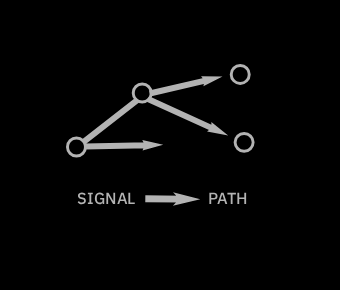
<style>
.page{position:relative;width:340px;height:290px;background:#000000}
.page>*{position:absolute;margin:0}
.t1{font:16.1px "IBMPlexSans-Medium";color:#b3b3b3}
</style>
<div class="page">
<p class="t1" style="left:77px;top:192px;width:58px;height:13px">SIGNAL</p>
<p class="t1" style="left:209px;top:192px;width:38px;height:12px">PATH</p>
</div>
